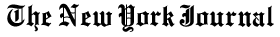
<style>
.page{position:relative;width:280px;height:37px;background:#ffffff}
.page>*{position:absolute;margin:0}
.t1{font:33px "EnglishTowne-Normal";color:#000000}
</style>
<div class="page">
<p class="t1" style="left:7px;top:4px;width:45px;height:28px">The</p>
<p class="t1" style="left:58px;top:3px;width:55px;height:24px">New</p>
<p class="t1" style="left:118px;top:4px;width:57px;height:28px">York</p>
<p class="t1" style="left:179px;top:4px;width:95px;height:23px">Journal</p>
</div>
